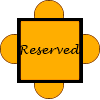
<style>
.page{position:relative;width:100px;height:100px;background:#ffae00}
.page>*{position:absolute;margin:0}
.t1{font:12.5px "LucidaHandwriting-Italic";color:#000000}
</style>
<div class="page">
<p class="t1" style="left:19px;top:44px;width:64px;height:11px">Reserved</p>
</div>
